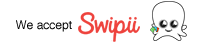
<style>
.page{position:relative;width:200px;height:50px;background:#ffffff}
.page>*{position:absolute;margin:0}
.t1{font:12px "Helvetica";color:#000000}
</style>
<div class="page">
<p class="t1" style="left:16px;top:20px;width:56px;height:12px">We accept</p>
</div>
